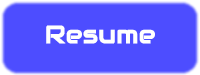
<style>
.page{position:relative;width:200px;height:75px;background:#4d4dff}
.page>*{position:absolute;margin:0}
.t1{font:25px "Audiowide-Regular";color:#ffffff;font-weight:bold}
</style>
<div class="page">
<p class="t1" style="left:46px;top:25px;width:109px;height:19px">Resume</p>
</div>
